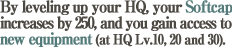
<style>
.page{position:relative;width:232px;height:49px;background:#ffffff}
.page>*{position:absolute;margin:0}
.t1{font:16px/16px "RyuminPro-ExBold";letter-spacing:-0.1em;color:#4c4842;font-weight:bold;scale:0.9 1}
.t2{font:16px/16px "RyuminPro-ExBold";letter-spacing:-0.08em;color:#4c4842;font-weight:bold;scale:0.9 1}
.t3{font:16px/16px "RyuminPro-ExBold";letter-spacing:-0.08em;color:#547b7a;font-weight:bold;scale:0.9 1}
.t4{font:16px/16px "RyuminPro-ExBold";letter-spacing:-0.085em;color:#547b7a;font-weight:bold;scale:0.9 1}
.t5{font:14px/16px "RyuminPro-ExBold";letter-spacing:-0.08em;color:#4c4842;font-weight:bold;scale:0.9 1}
</style>
<div class="page">
<p class="t1" style="left:0px;top:0px;width:233px;height:47px"><span class="t2">By leveling up your HQ, your </span><span class="t3">Softcap<br></span>increases by 250, and you gain access to<br><span class="t4">new </span><span class="t3">equipment </span><span class="t5">(at HQ Lv.10, 20 and 30).</span></p>
</div>
